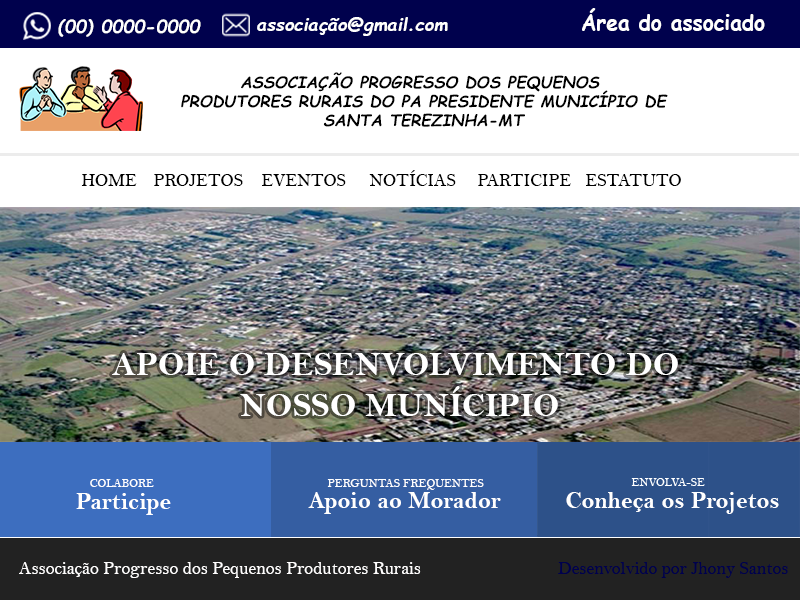
<style>
.page{position:relative;width:800px;height:600px;background:#ffffff}
.page>*{position:absolute;margin:0}
.t1{font:18px "ComicSansMS-BoldItalic";color:#ffffff}
.t2{font:21px "ComicSansMS-Bold";color:#ffffff}
.t3{font:16px "ComicSansMS-BoldItalic";color:#000000}
.t4{font:18px "BellMT";color:#000000}
.t5{font:34.1px "BellMTBold";color:#ffffff}
.t6{font:12px "BellMT";color:#ffffff}
.t7{font:24px "BellMTBold";color:#ffffff}
.t8{font:18px "BellMT";color:#fffefe}
.t9{font:18px "BellMT";color:#00014d}
</style>
<div class="page">
<p class="t1" style="left:257px;top:17px;width:191px;height:19px">associação@gmail.com</p>
<p class="t2" style="left:582px;top:8px;width:183px;height:23px">Área do associado</p>
<p class="t1" style="left:58px;top:19px;width:143px;height:18px">(00) 0000-0000</p>
<p class="t3" style="left:181px;top:72px;width:487px;height:55px;text-align:center">ASSOCIAÇÃO PROGRESSO DOS PEQUENOS<br> PRODUTORES RURAIS DO PA PRESIDENTE MUNICÍPIO DE<br> SANTA TEREZINHA-MT</p>
<p class="t4" style="left:81px;top:170px;width:600px;height:16px">HOME PROJETOS EVENTOS NOTÍCIAS PARTICIPE ESTATUTO</p>
<p class="t5" style="left:112px;top:353px;width:566px;height:63px;text-align:center">APOIE O DESENVOLVIMENTO DO <br>NOSSO MUNÍCIPIO</p>
<p class="t6" style="left:90px;top:479px;width:64px;height:8px">COLABORE</p>
<p class="t6" style="left:327px;top:479px;width:157px;height:11px">PERGUNTAS FREQUENTES</p>
<p class="t7" style="left:76px;top:493px;width:95px;height:22px">Participe</p>
<p class="t7" style="left:308px;top:492px;width:193px;height:22px">Apoio ao Morador</p>
<p class="t7" style="left:566px;top:492px;width:213px;height:22px">Conheça os Projetos</p>
<p class="t8" style="left:19px;top:562px;width:402px;height:16px">Associação Progresso dos Pequenos Produtores Rurais</p>
<p class="t9" style="left:558px;top:562px;width:230px;height:16px">Desenvolvido por Jhony Santos</p>
</div>
